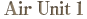
<style>
.page{position:relative;width:87px;height:19px;background:#ffffff}
.page>*{position:absolute;margin:0}
.t1{font:18px "RyuminPro-ExBold";letter-spacing:-0.04em}
</style>
<div class="page">
<p class="t1" style="left:4px;top:1px;width:79px;height:14px">Air Unit 1</p>
</div>
